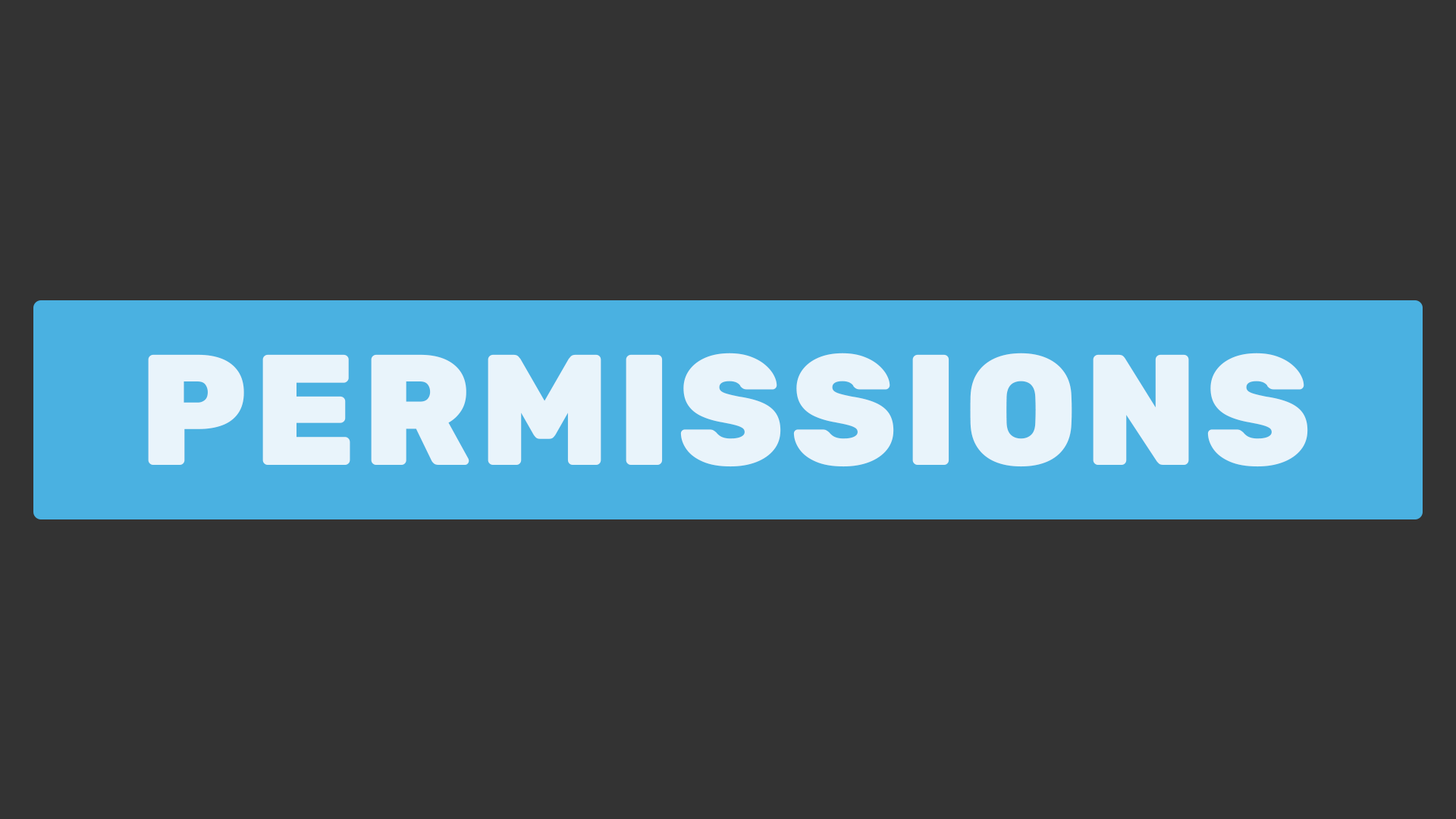
<style>
.page{position:relative;width:1456px;height:819px;background:#333333}
.page>*{position:absolute;margin:0}
.t1{font:155.1px "Rubik-ExtraBold";letter-spacing:0.02em;color:#ffffff;font-weight:bold}
</style>
<div class="page">
<p class="t1" style="left:148px;top:353px;width:1160px;height:114px;opacity:0.85">PERMISSIONS</p>
</div>
